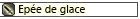
<style>
.page{position:relative;width:140px;height:19px;background:#ffffff}
.page>*{position:absolute;margin:0}
.t1{font:10.9px "LaoUI";color:#000000}
</style>
<div class="page">
<p class="t1" style="left:19px;top:4px;width:66px;height:11px">Epée de glace</p>
</div>
